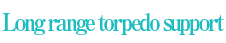
<style>
.page{position:relative;width:226px;height:43px;background:#ffffff}
.page>*{position:absolute;margin:0}
.t1{font:24px "RyuminPro-ExBold";letter-spacing:-0.125em;color:#1dbcc0;scale:0.9 1}
</style>
<div class="page">
<p class="t1" style="left:2px;top:13px;width:222px;height:22px">Long range torpedo support</p>
</div>
